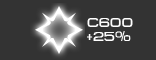
<style>
.page{position:relative;width:156px;height:60px;background:#333333}
.page>*{position:absolute;margin:0}
.t1{font:13px "MetroDF";color:#ffffff}
</style>
<div class="page">
<p class="t1" style="left:87px;top:18px;width:46px;height:9px">c600</p>
<p class="t1" style="left:87px;top:31px;width:44px;height:10px">+25%</p>
</div>
